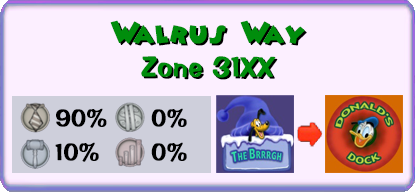
<style>
.page{position:relative;width:415px;height:192px;background:#fcefff}
.page>*{position:absolute;margin:0}
.t1{font:28px "Minnie";color:#008d0c;font-weight:bold}
.t2{font:28px "Minnie";font-weight:bold}
.t3{font:28px "ImpressBT-Regular";color:#008d0c;font-weight:bold}
.t4{font:28px "ImpressBT-Regular";font-weight:bold}
.t5{font:23.6px "ImpressBT-Regular";color:#000000;font-weight:bold}
</style>
<div class="page">
<p class="t1" style="left:110px;top:20px;width:195px;height:24px">Walrus Way</p>
<p class="t2" style="left:112px;top:22px;width:195px;height:24px">Walrus Way</p>
<p class="t3" style="left:141px;top:56px;width:135px;height:22px">Zone 31XX</p>
<p class="t4" style="left:143px;top:58px;width:135px;height:22px">Zone 31XX</p>
<p class="t5" style="left:56px;top:108px;width:51px;height:20px">90%</p>
<p class="t5" style="left:151px;top:108px;width:36px;height:20px">0%</p>
<p class="t5" style="left:55px;top:142px;width:44px;height:20px">10%</p>
<p class="t5" style="left:151px;top:142px;width:36px;height:20px">0%</p>
</div>
